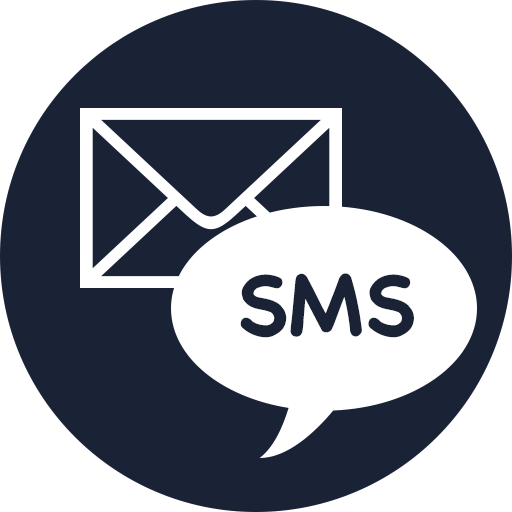
<style>
.page{position:relative;width:512px;height:512px;background:#1a2236}
.page>*{position:absolute;margin:0}
.t1{font:86px "Chalkboard-Bold";color:#1a2236}
</style>
<div class="page">
<p class="t1" style="left:240px;top:273px;width:174px;height:65px">SMS</p>
</div>
